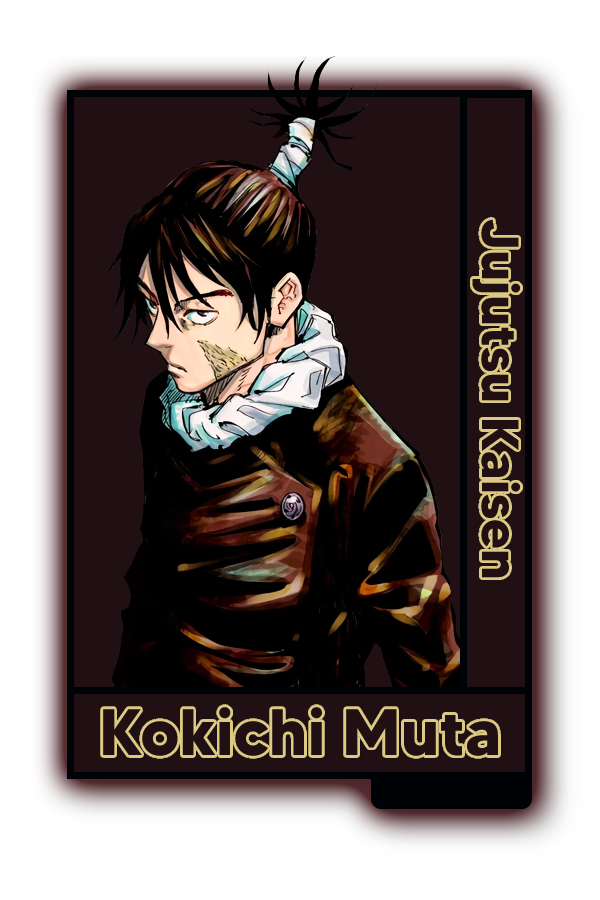
<style>
.page{position:relative;width:600px;height:900px;background:#201014}
.page>*{position:absolute;margin:0}
.t1{font:52px "MADETOMMY-Bold";color:#1e1214}
.t2{font:65.2px "MADETOMMY-Bold";color:#1e1214}
</style>
<div class="page">
<p class="t1" style="left:472px;top:219px;width:49px;height:359px;rotate:90deg">Jujutsu Kaisen</p>
<p class="t2" style="left:103px;top:707px;width:395px;height:49px">Kokichi Muta</p>
</div>
